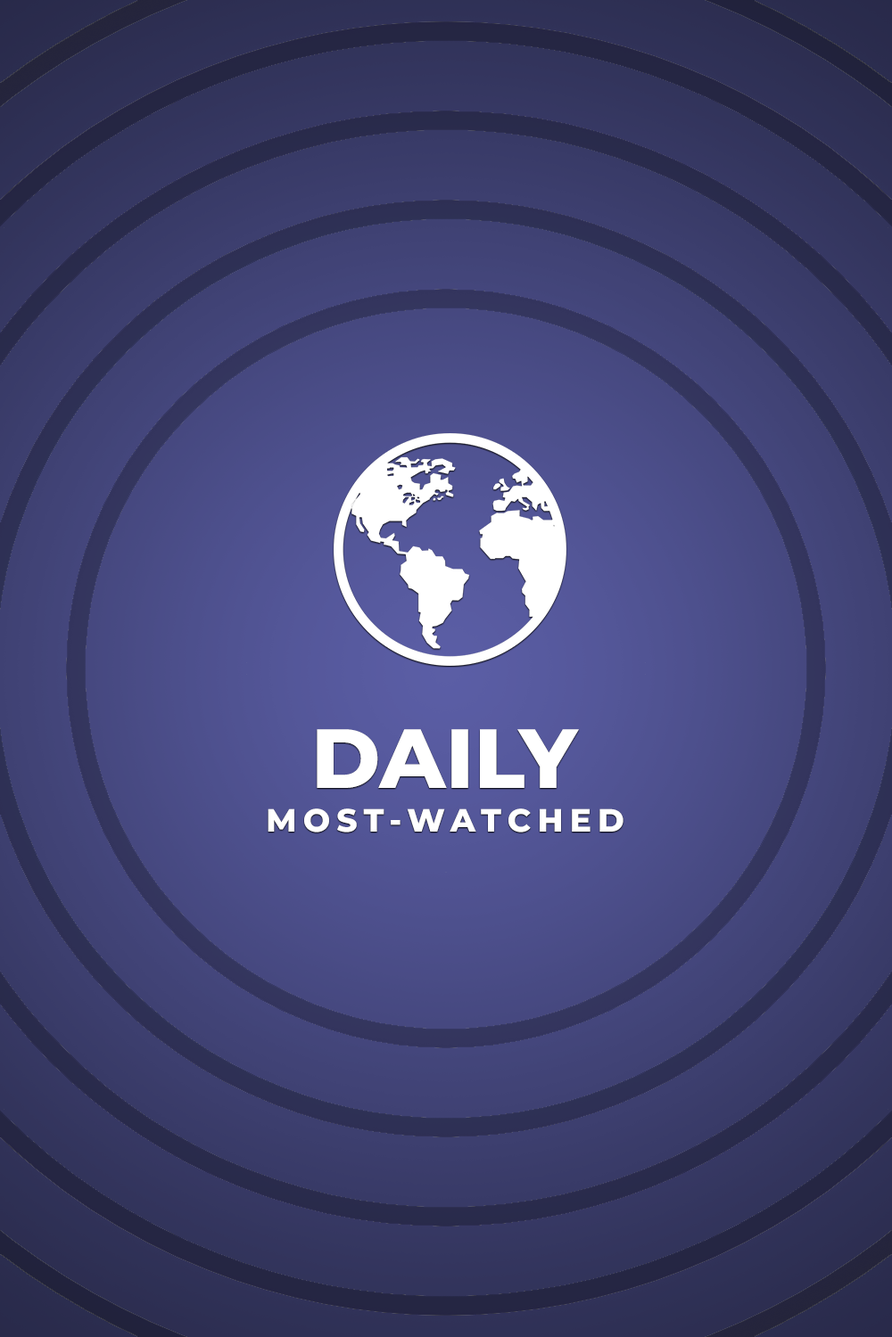
<style>
.page{position:relative;width:892px;height:1337px}
.page>*{position:absolute;margin:0}
.t1{font:83.8px "MontserratRoman-ExtraBold";color:#ffffff}
.t2{font:32.1px "MontserratRoman-ExtraBold";letter-spacing:0.2em;color:#ffffff}
</style>
<div class="page">
<p class="t1" style="left:317px;top:729px;width:262px;height:59px">DAILY</p>
<p class="t2" style="left:267px;top:809px;width:356px;height:24px">MOST-WATCHED</p>
</div>
